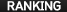
<style>
.page{position:relative;width:67px;height:12px}
.page>*{position:absolute;margin:0}
.t1{font:12.2px "HCRDotum-Bold";color:#ffffff}
</style>
<div class="page">
<p class="t1" style="left:7px;top:1px;width:54px;height:10px">RANKING</p>
</div>
